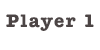
<style>
.page{position:relative;width:100px;height:50px;background:#ffffff}
.page>*{position:absolute;margin:0}
.t1{font:18.7px "AmericanTypewriter-Bold";letter-spacing:0.075em;color:#4c4545}
</style>
<div class="page">
<p class="t1" style="left:6px;top:14px;width:88px;height:17px">Player 1</p>
</div>
